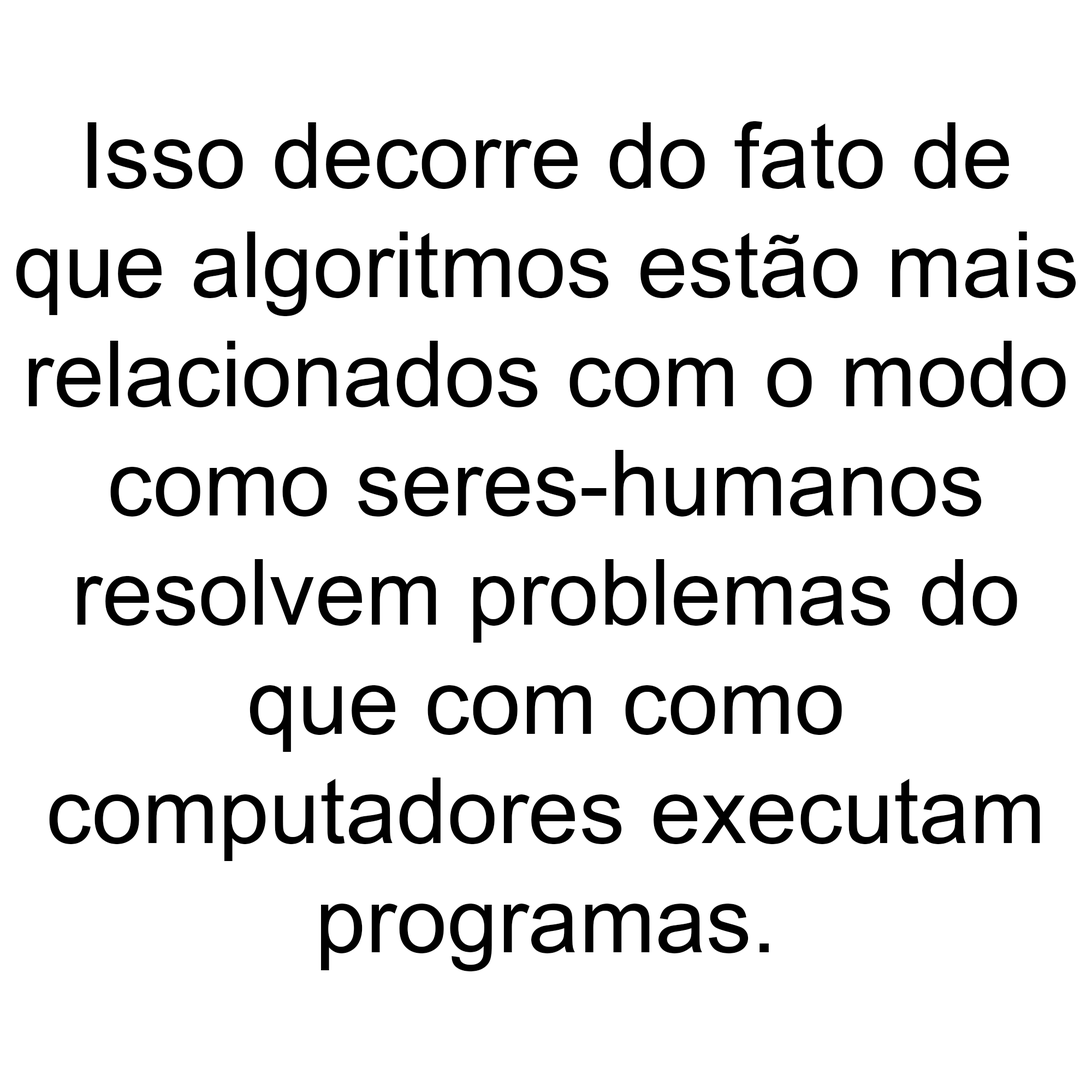
<style>
.page{position:relative;width:1092px;height:1092px;background:#ffffff}
.page>*{position:absolute;margin:0}
.t1{font:91px "ArialMT";color:#000000}
</style>
<div class="page">
<p class="t1" style="left:16px;top:121px;width:1060px;height:850px;text-align:center">Isso decorre do fato de<br>que algoritmos estão mais<br>relacionados com o modo<br>como seres-humanos<br>resolvem problemas do<br>que com como<br>computadores executam<br>programas.</p>
</div>
